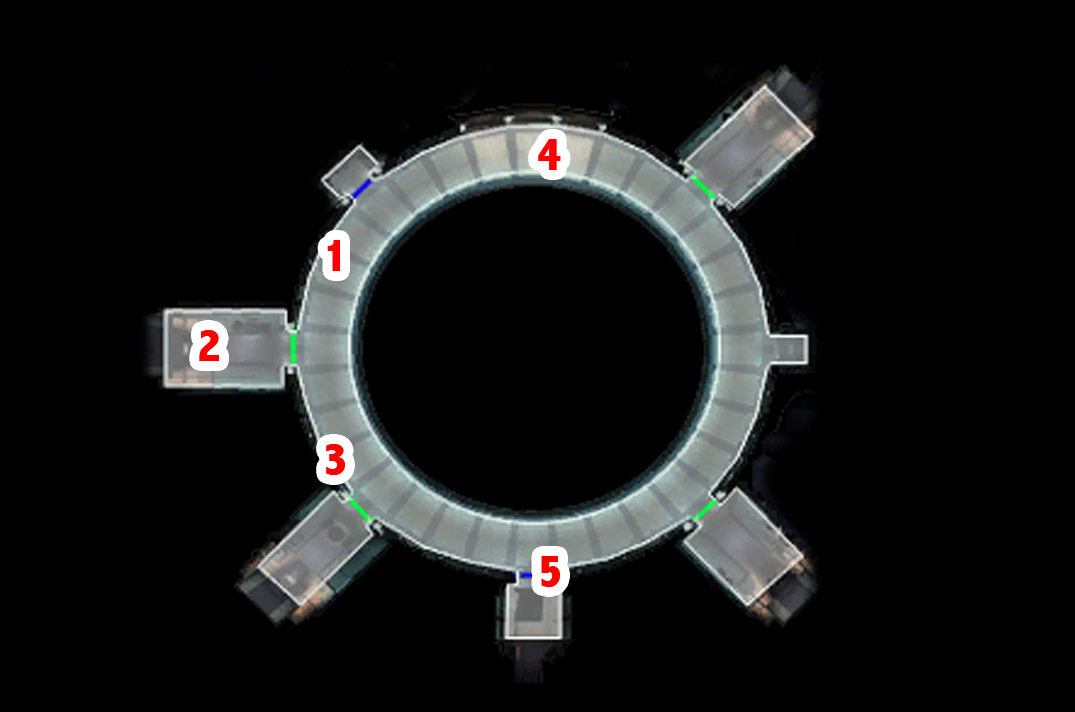
<style>
.page{position:relative;width:1075px;height:712px;background:#000000}
.page>*{position:absolute;margin:0}
.t1{font:48px "AbadiMT-CondensedExtraBold";color:#ff0000}
</style>
<div class="page">
<p class="t1" style="left:538px;top:139px;width:23px;height:31px">4</p>
<p class="t1" style="left:327px;top:240px;width:13px;height:31px">1</p>
<p class="t1" style="left:199px;top:330px;width:20px;height:31px">2</p>
<p class="t1" style="left:326px;top:444px;width:19px;height:31px">3</p>
<p class="t1" style="left:541px;top:556px;width:19px;height:31px">5</p>
</div>
